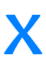
<style>
.page{position:relative;width:46px;height:70px;background:#ffffff}
.page>*{position:absolute;margin:0}
.t1{font:84px "Candara";color:#0080ff}
</style>
<div class="page">
<p class="t1" style="left:4px;top:15px;width:38px;height:39px">x</p>
</div>
